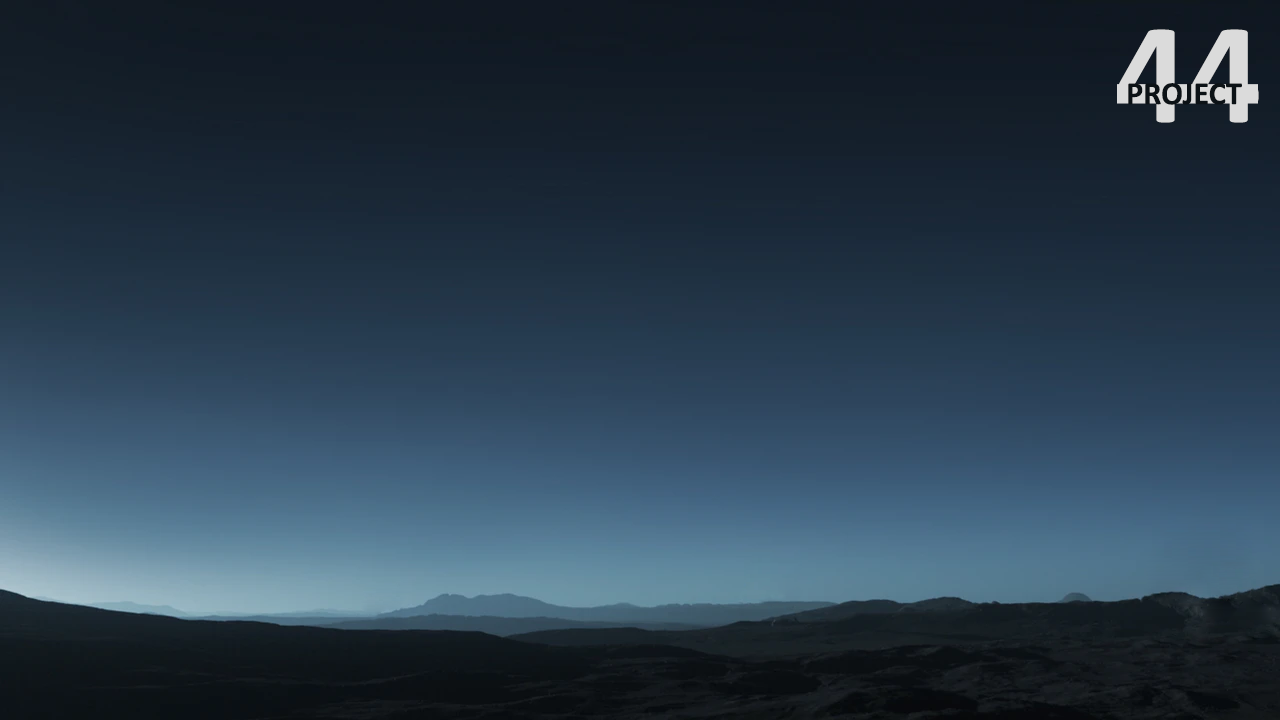
<style>
.page{position:relative;width:1280px;height:720px}
.page>*{position:absolute;margin:0}
.t1{font:145.4px "Calibri-Bold";color:#dbdbdb}
.t2{font:32.5px "Calibri-Bold";color:#0c1216}
</style>
<div class="page">
<p class="t1" style="left:1117px;top:29px;width:142px;height:94px">44</p>
<p class="t2" style="left:1128px;top:83px;width:114px;height:22px">PROJECT</p>
</div>
